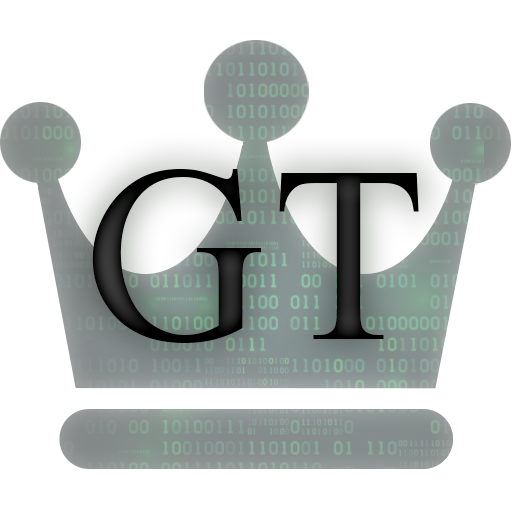
<style>
.page{position:relative;width:512px;height:512px;background:#ffffff}
.page>*{position:absolute;margin:0}
.t1{font:250px "TimesNewRomanPSMT";letter-spacing:0.03em;color:#121212}
</style>
<div class="page">
<p class="t1" style="left:92px;top:169px;width:327px;height:174px">GT</p>
</div>
